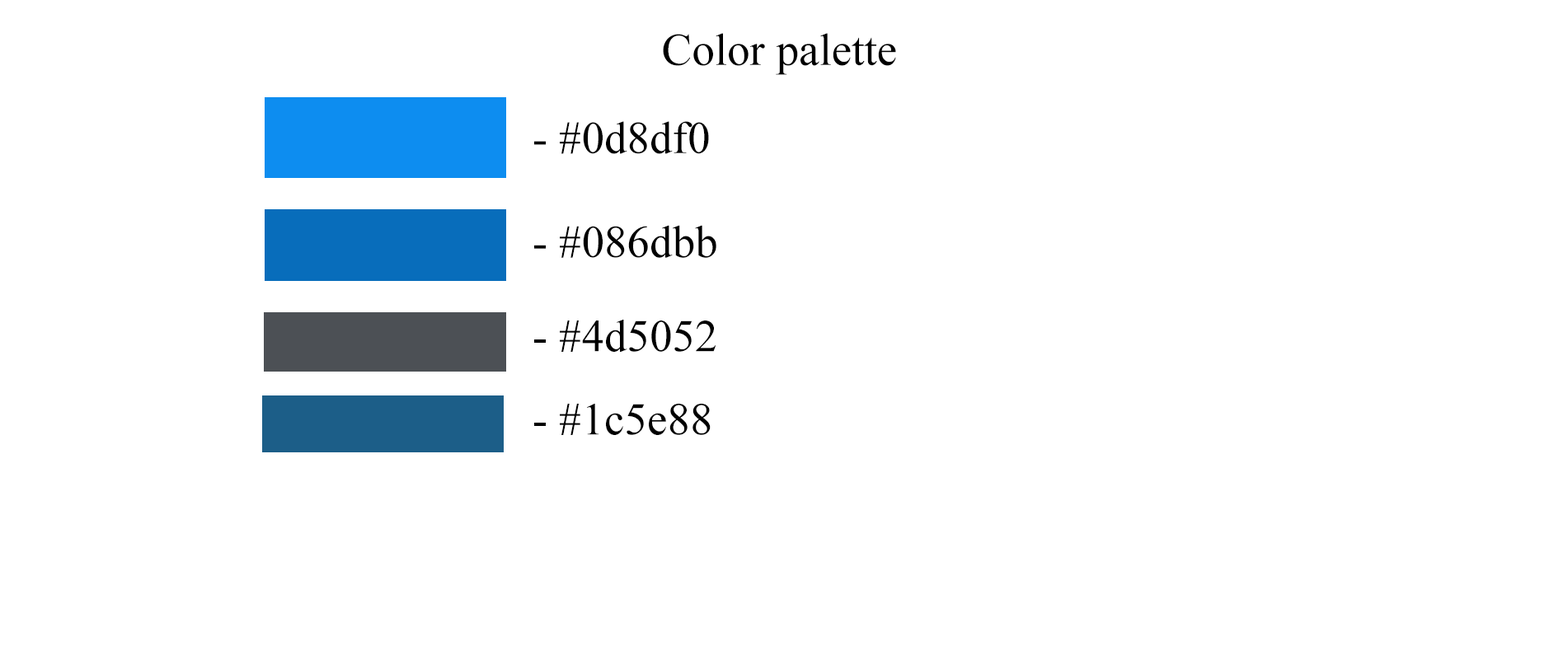
<style>
.page{position:relative;width:1568px;height:655px;background:#ffffff}
.page>*{position:absolute;margin:0}
.t1{font:45.3px "TimesNewRomanPSMT";color:#000000}
</style>
<div class="page">
<p class="t1" style="left:663px;top:33px;width:233px;height:42px">Color palette</p>
<p class="t1" style="left:534px;top:121px;width:175px;height:33px">- #0d8df0</p>
<p class="t1" style="left:534px;top:225px;width:182px;height:33px">- #086dbb</p>
<p class="t1" style="left:534px;top:320px;width:182px;height:32px">- #4d5052</p>
<p class="t1" style="left:534px;top:404px;width:177px;height:31px">- #1c5e88</p>
</div>
